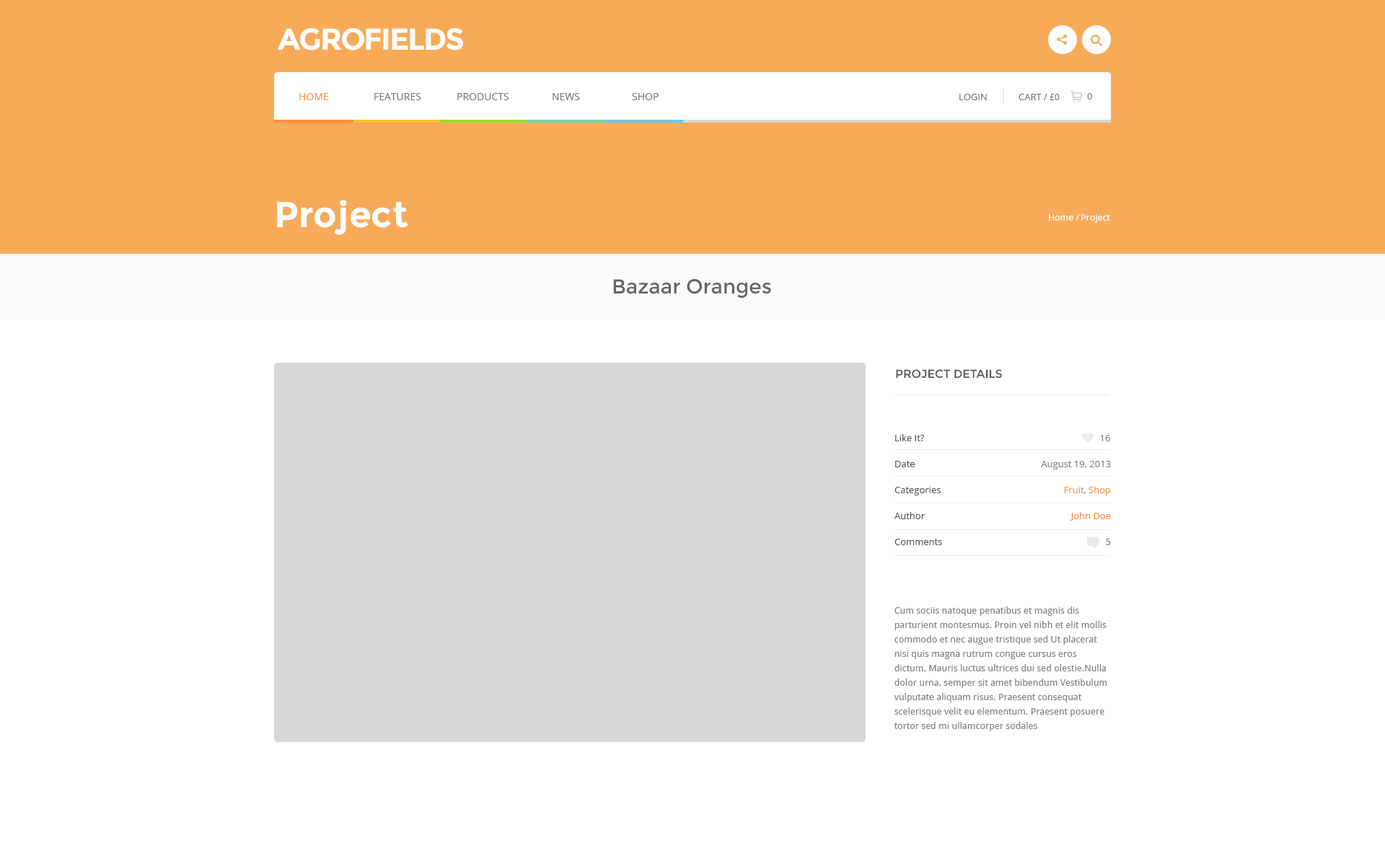
<style>
.page{position:relative;width:1385px;height:861px;background:#ffffff}
.page>*{position:absolute;margin:0}
.t1{font:30.3px "Montserrat-Bold";letter-spacing:-0.05em;color:#ffffff;text-transform:uppercase}
.t2{font:10.1px "OpenSans";color:#ff8f3c;text-transform:uppercase}
.t3{font:10.1px "OpenSans";color:#767676;text-transform:uppercase}
.t4{font:9.4px "OpenSans";color:#767676;text-transform:uppercase}
.t5{font:8.7px "OpenSans";color:#767676;text-transform:uppercase}
.t6{font:36.1px "Montserrat-Bold";color:#ffffff}
.t7{font:9.4px "DroidSans";color:#ffffff}
.t8{font:20.2px "Montserrat-Regular";color:#656565}
.t9{font:11.5px "Montserrat-Regular";color:#565656;text-transform:uppercase}
.t10{font:9.4px/26px "OpenSans";color:#565656}
.t11{font:9.4px "OpenSans";color:#838383}
.t12{font:9.4px/26px "OpenSans";color:#838383}
.t13{font:9.4px/26px "OpenSans";color:#ff8f3c}
.t14{font:9.4px/14.4px "DroidSans";color:#838383}
</style>
<div class="page">
<p class="t1" style="left:277px;top:28px;width:186px;height:22px">Agrofields</p>
<p class="t2" style="left:299px;top:93px;width:29px;height:7px">Home</p>
<p class="t3" style="left:374px;top:93px;width:47px;height:7px">Features</p>
<p class="t3" style="left:457px;top:93px;width:52px;height:7px">Products</p>
<p class="t3" style="left:552px;top:93px;width:28px;height:7px">News</p>
<p class="t3" style="left:632px;top:93px;width:26px;height:7px">Shop</p>
<p class="t4" style="left:959px;top:94px;width:28px;height:6px">Login</p>
<p class="t4" style="left:1018px;top:94px;width:41px;height:6px">cart / <span class="t5">£0</span></p>
<p class="t4" style="left:1087px;top:93px;width:5px;height:7px">0</p>
<p class="t6" style="left:277px;top:200px;width:131px;height:35px">Project</p>
<p class="t7" style="left:1049px;top:214px;width:31px;height:7px">Home /</p>
<p class="t7" style="left:1081px;top:214px;width:29px;height:9px">Project</p>
<p class="t8" style="left:613px;top:279px;width:158px;height:19px">Bazaar Oranges</p>
<p class="t9" style="left:896px;top:369px;width:106px;height:10px">Project Details</p>
<p class="t10" style="left:894px;top:434px;width:48px;height:111px">Like It?<br>Date<br>Categories<br>Author<br>Comments<br>Site map</p>
<p class="t11" style="left:1100px;top:435px;width:10px;height:6px">16</p>
<p class="t12" style="left:1041px;top:461px;width:70px;height:84px;text-align:right">August 19, 2013<br><span class="t13">Fruit</span>, <span class="t13">Shop<br>John Doe<br></span>5<br>Site map</p>
<p class="t14" style="left:894px;top:607px;width:213px;height:124px">Cum sociis natoque penatibus et magnis dis parturient montesmus. Proin vel nibh et elit mollis commodo et nec augue tristique sed Ut placerat nisi quis magna rutrum congue cursus eros dictum. Mauris luctus ultrices dui sed olestie.Nulla dolor urna, semper sit amet bibendum Vestibulum vulputate aliquam risus. Praesent consequat scelerisque velit eu elementum. Praesent posuere tortor sed mi ullamcorper sodales<br>. Cras porta purus in.</p>
</div>
